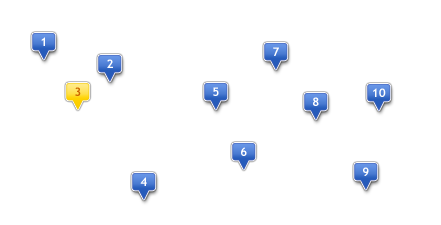
<style>
.page{position:relative;width:441px;height:225px;background:#ffffff}
.page>*{position:absolute;margin:0}
.t1{font:12px "TrebuchetMS-Bold";color:#ffffff}
.t2{font:12px "TrebuchetMS-Bold";color:#cc6600}
</style>
<div class="page">
<p class="t1" style="left:41px;top:37px;width:4px;height:9px">1</p>
<p class="t1" style="left:273px;top:47px;width:6px;height:9px">7</p>
<p class="t1" style="left:107px;top:59px;width:6px;height:9px">2</p>
<p class="t2" style="left:75px;top:87px;width:6px;height:9px">3</p>
<p class="t1" style="left:213px;top:87px;width:6px;height:9px">5</p>
<p class="t1" style="left:373px;top:88px;width:13px;height:9px">10</p>
<p class="t1" style="left:313px;top:97px;width:6px;height:9px">8</p>
<p class="t1" style="left:241px;top:147px;width:6px;height:9px">6</p>
<p class="t1" style="left:363px;top:167px;width:6px;height:9px">9</p>
<p class="t1" style="left:140px;top:177px;width:7px;height:9px">4</p>
</div>
